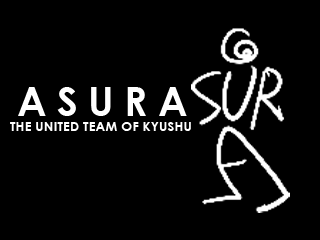
<style>
.page{position:relative;width:320px;height:240px;background:#000000}
.page>*{position:absolute;margin:0}
.t1{font:40px "CenturyGothic-Bold";letter-spacing:0.26em;color:#ffffff}
.t2{font:13.3px "CenturyGothic-Bold";color:#ffffff}
</style>
<div class="page">
<p class="t1" style="left:18px;top:87px;width:169px;height:29px">ASURA</p>
<p class="t2" style="left:10px;top:122px;width:181px;height:9px">THE UNITED TEAM OF KYUSHU</p>
</div>
